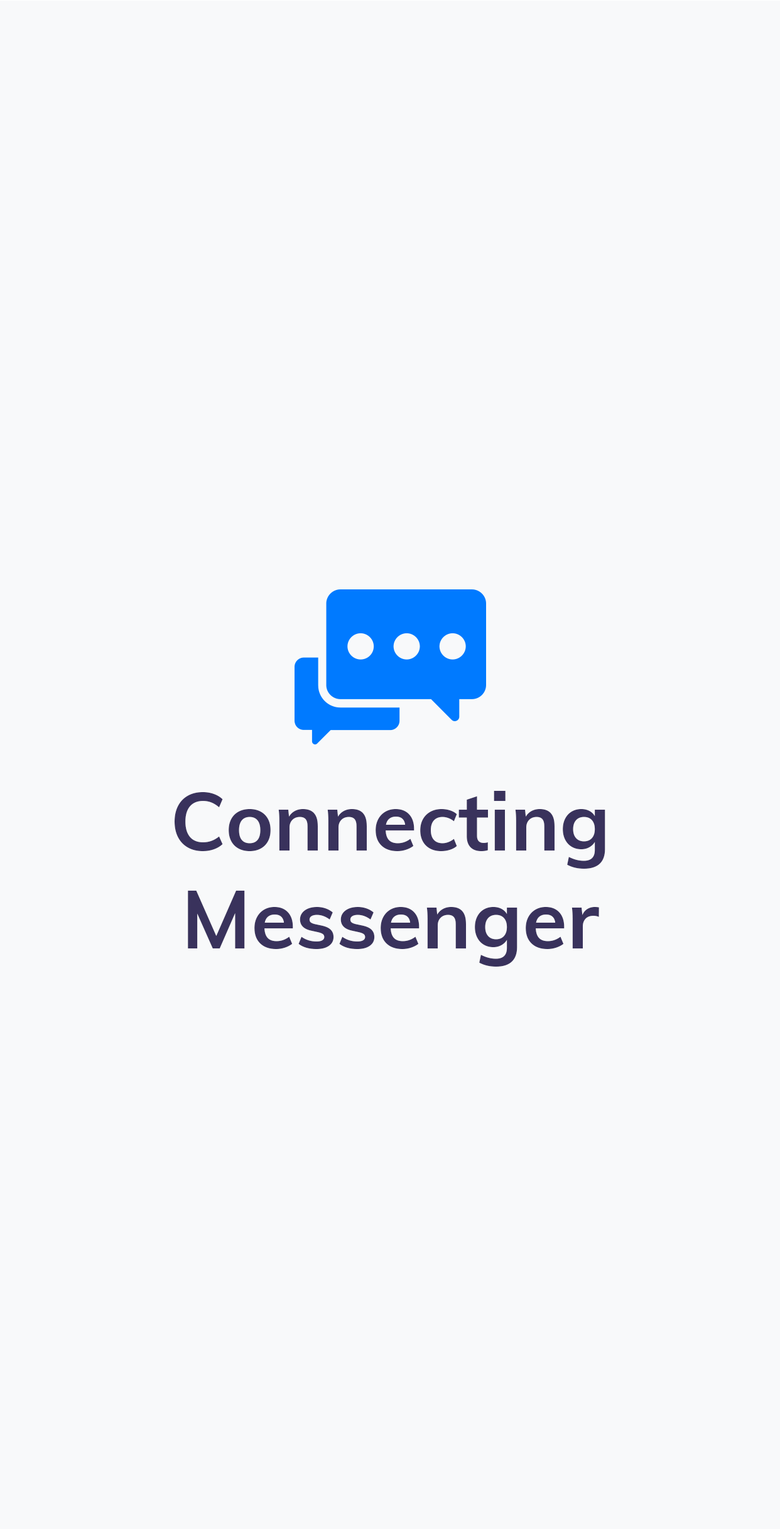
<style>
.page{position:relative;width:780px;height:1529px;background:#f8f9fa}
.page>*{position:absolute;margin:0}
.t1{font:81.6px "Muli-Bold";color:#39325c}
</style>
<div class="page">
<p class="t1" style="left:175px;top:791px;width:430px;height:176px;text-align:center">Connecting<br>Messenger</p>
</div>
